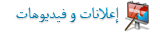
<style>
.page{position:relative;width:160px;height:33px;background:#ffffff}
.page>*{position:absolute;margin:0}
.t1{font:22px "MicrosoftUighur";color:#0079ac}
</style>
<div class="page">
<p class="t1" style="left:16px;top:7px;width:103px;height:16px">إعلانات و فيديوهات</p>
</div>
